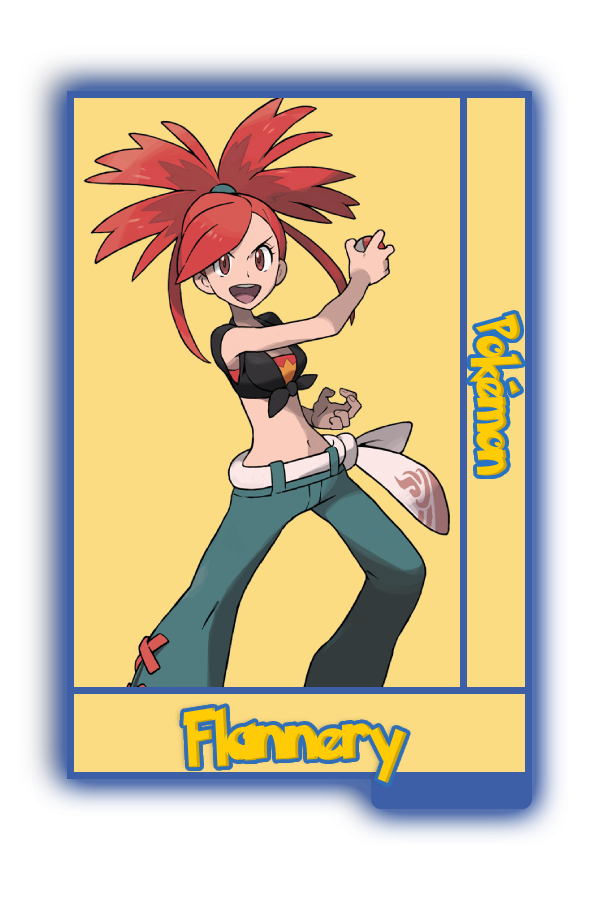
<style>
.page{position:relative;width:600px;height:900px;background:#fbdc83}
.page>*{position:absolute;margin:0}
.t1{font:48.8px "PokemonSolidNormal";color:#ffcb05;scale:0.8 1}
.t2{font:56.6px "PokemonSolidNormal";color:#ffcb05;scale:0.92 1}
</style>
<div class="page">
<p class="t1" style="left:469px;top:313px;width:54px;height:163px;rotate:90deg">Pokémon</p>
<p class="t2" style="left:183px;top:706px;width:224px;height:77px">Flannery</p>
</div>
